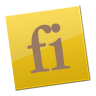
<style>
.page{position:relative;width:96px;height:96px;background:#ffffff}
.page>*{position:absolute;margin:0}
.t1{font:72px "Garamond-Bold";color:#977862}
</style>
<div class="page">
<p class="t1" style="left:27px;top:23px;width:43px;height:51px;rotate:-8deg">fi</p>
</div>
